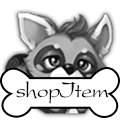
<style>
.page{position:relative;width:120px;height:120px;background:#ffffff}
.page>*{position:absolute;margin:0}
.t1{font:24px "FZGLJW--GB1-0";color:#000000}
</style>
<div class="page">
<p class="t1" style="left:16px;top:81px;width:93px;height:23px">shopItem</p>
</div>
